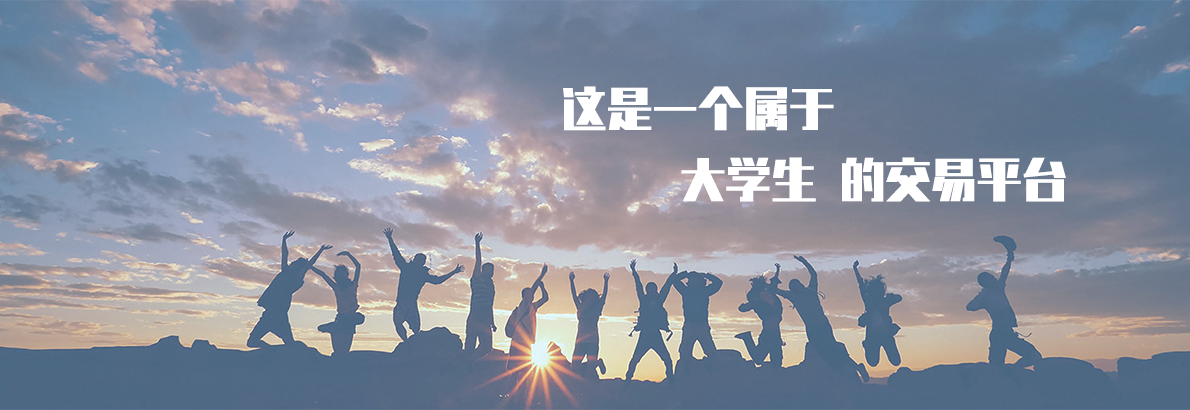
<style>
.page{position:relative;width:1190px;height:410px}
.page>*{position:absolute;margin:0}
.t1{font:45.6px "REEJI-JinGang-ExtraBoldGB1.0";color:#ffffff}
</style>
<div class="page">
<p class="t1" style="left:563px;top:86px;width:271px;height:45px">这是一个属于</p>
<p class="t1" style="left:681px;top:157px;width:385px;height:45px">大学生 的交易平台</p>
</div>
